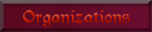
<style>
.page{position:relative;width:152px;height:32px}
.page>*{position:absolute;margin:0}
.t1{font:20px "MorrisRomanAlternate-Black"}
</style>
<div class="page">
<p class="t1" style="left:23px;top:10px;width:107px;height:17px">Organizations</p>
</div>
